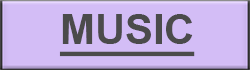
<style>
.page{position:relative;width:250px;height:70px;background:#d3bdf6}
.page>*{position:absolute;margin:0}
.t1{font:41.7px "Arial-BoldMT";color:#4b4b4b;text-decoration:underline}
</style>
<div class="page">
<p class="t1" style="left:59px;top:14px;width:136px;height:43px">MUSIC</p>
</div>
